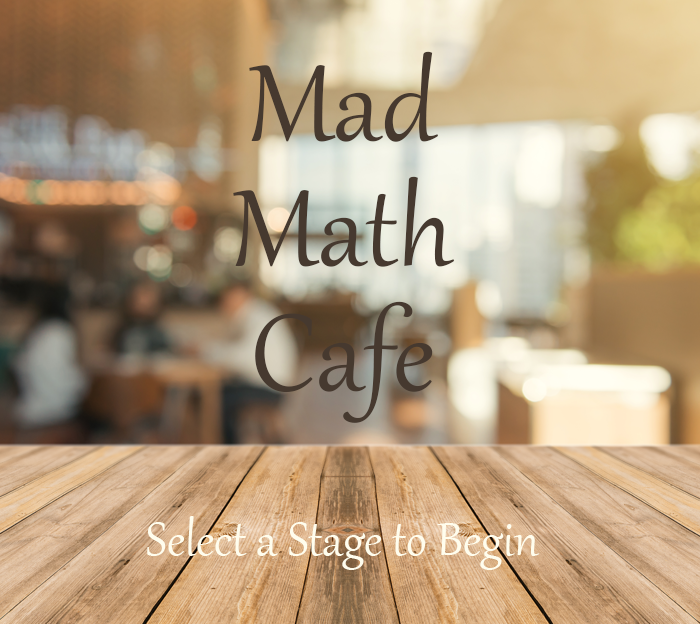
<style>
.page{position:relative;width:700px;height:624px}
.page>*{position:absolute;margin:0}
.t1{font:133.3px/125px "Gabriola";color:#46392f}
.t2{font:58.3px "Gabriola";color:#fffded}
</style>
<div class="page">
<p class="t1" style="left:233px;top:51px;width:222px;height:372px;text-align:center">Mad<br>Math<br>Cafe</p>
<p class="t2" style="left:147px;top:516px;width:393px;height:54px">Select a Stage to Begin</p>
</div>
